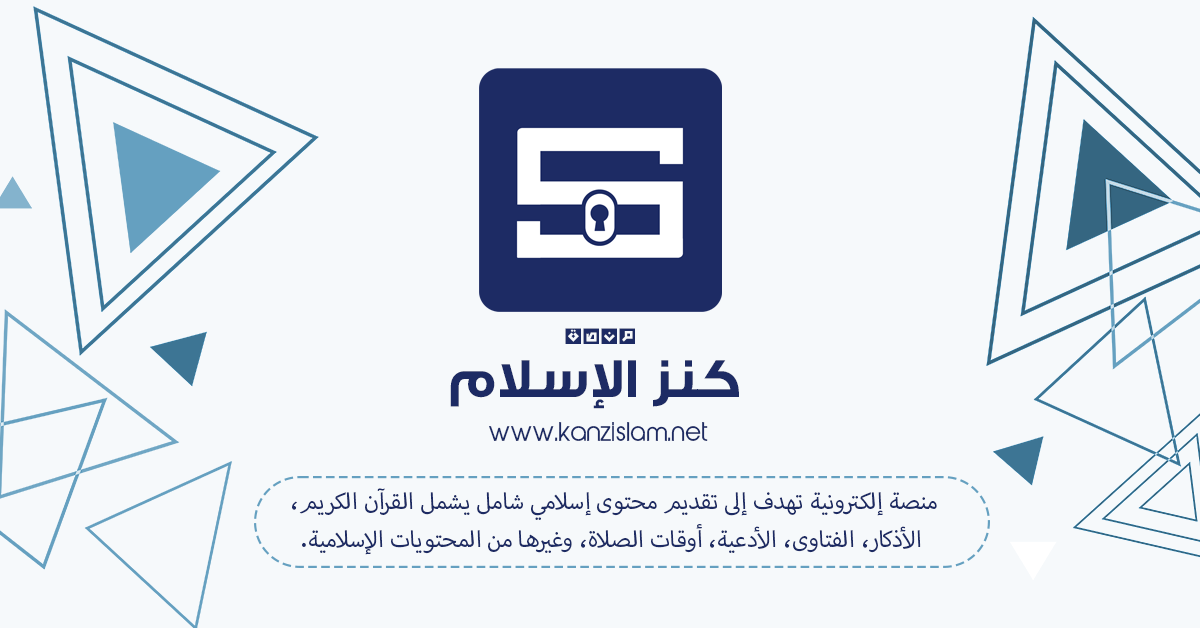
<style>
.page{position:relative;width:1200px;height:628px;background:#f6f9fb}
.page>*{position:absolute;margin:0}
.t1{font:24px "GEBox-Bold";color:#1d2b64}
.t2{font:56.9px "GESSTwoBold-Bold";color:#1d2b64}
.t3{font:24px "AbeatbyKai";color:#1d2b64}
.t4{font:32px "MyriadArabic-Regular";color:#1d2b64}
</style>
<div class="page">
<p class="t1" style="left:565px;top:328px;width:70px;height:16px">منصة</p>
<p class="t2" style="left:450px;top:360px;width:289px;height:49px">كنز الإسلام</p>
<p class="t3" style="left:489px;top:422px;width:219px;height:19px">www.kanzislam.net</p>
<p class="t4" style="left:292px;top:488px;width:645px;height:67px;text-align:center">منصة إلكترونية تهدف إلى تقديم محتوى إسلامي شامل يشمل القرآن الكريم،<br> الأذكار، الفتاوى، الأدعية، أوقات الصلاة، وغيرها من المحتويات الإسلامية.</p>
</div>
